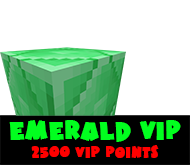
<style>
.page{position:relative;width:190px;height:165px;background:#ffffff}
.page>*{position:absolute;margin:0}
.t1{font:25px "HotMustardBTN";color:#01ff1f}
.t2{font:15px "HotMustardBTN";color:#ff0000}
</style>
<div class="page">
<p class="t1" style="left:9px;top:120px;width:172px;height:22px">Emerald VIP</p>
<p class="t2" style="left:31px;top:145px;width:128px;height:13px">2500 VIP Points</p>
</div>
